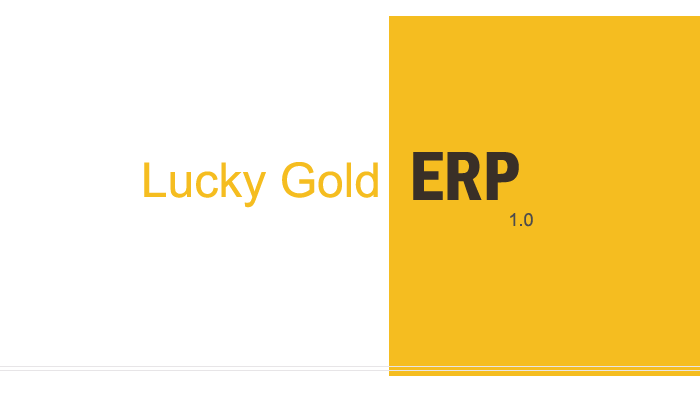
<style>
.page{position:relative;width:700px;height:400px;background:#ffffff}
.page>*{position:absolute;margin:0}
.t1{font:72px "FranklinGothic-DemiCond";color:#392f27}
.t2{font:48px "ArialMT";color:#f5bd20}
.t3{font:18px "ArialMT";color:#4d4c4c}
</style>
<div class="page">
<p class="t1" style="left:413px;top:152px;width:106px;height:48px">ERP</p>
<p class="t2" style="left:144px;top:162px;width:234px;height:46px">Lucky Gold</p>
<p class="t3" style="left:510px;top:213px;width:23px;height:14px">1.0</p>
</div>
